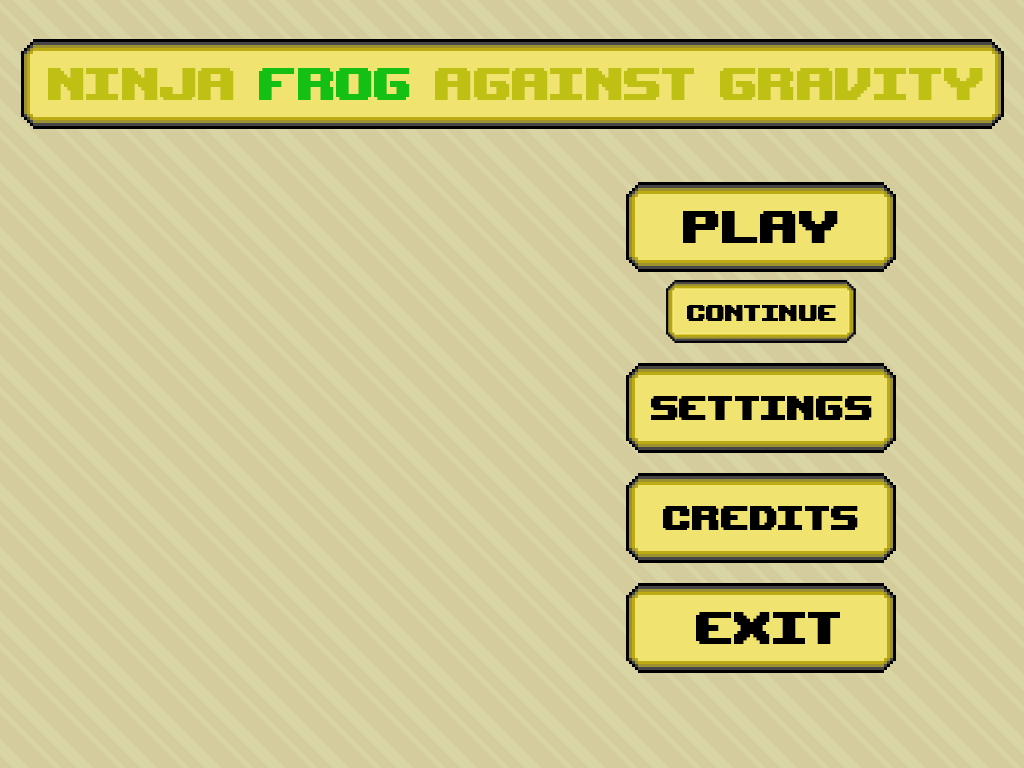
<style>
.page{position:relative;width:1024px;height:768px;background:#d5cc9e}
.page>*{position:absolute;margin:0}
.t1{font:64px "UpheavalTT-BRK-";color:#bec014}
.t2{font:64px "UpheavalTT-BRK-";color:#14c014}
.t3{font:64px "UpheavalTT-BRK-";color:#000000}
.t4{font:32px "UpheavalTT-BRK-";color:#000000}
.t5{font:48px "UpheavalTT-BRK-";color:#000000}
</style>
<div class="page">
<p class="t1" style="left:48px;top:68px;width:935px;height:32px">Ninja<span class="t2"> Frog </span>Against Gravity</p>
<p class="t3" style="left:683px;top:211px;width:155px;height:32px">play</p>
<p class="t4" style="left:687px;top:305px;width:149px;height:16px">continue</p>
<p class="t5" style="left:651px;top:396px;width:221px;height:24px">settings</p>
<p class="t5" style="left:663px;top:506px;width:195px;height:24px">credits</p>
<p class="t3" style="left:696px;top:612px;width:144px;height:32px">exit</p>
</div>
